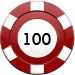
<style>
.page{position:relative;width:75px;height:75px;background:#ffffff}
.page>*{position:absolute;margin:0}
.t1{font:18px "Rockwell";color:#000000}
</style>
<div class="page">
<p class="t1" style="left:24px;top:33px;width:27px;height:12px">100</p>
</div>
